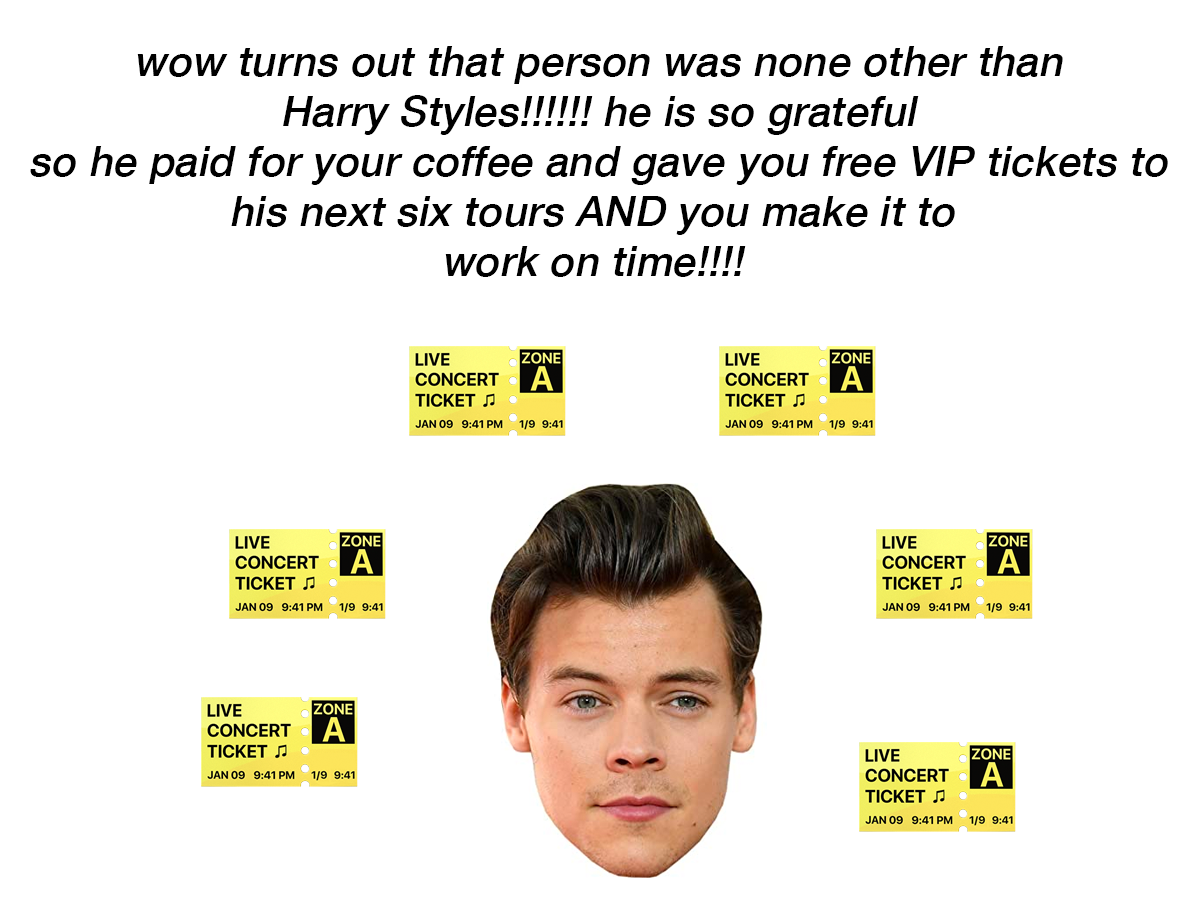
<style>
.page{position:relative;width:1200px;height:900px;background:#ffffff}
.page>*{position:absolute;margin:0}
.t1{font:41.7px "HelveticaNeue-Medium";letter-spacing:0.01em;color:#000000;font-style:italic}
</style>
<div class="page">
<p class="t1" style="left:30px;top:46px;width:1138px;height:231px;text-align:center">wow turns out that person was none other than<br>Harry Styles!!!!!! he is so grateful<br>so he paid for your coffee and gave you free VIP tickets to<br>his next six tours AND you make it to <br>work on time!!!!</p>
</div>
